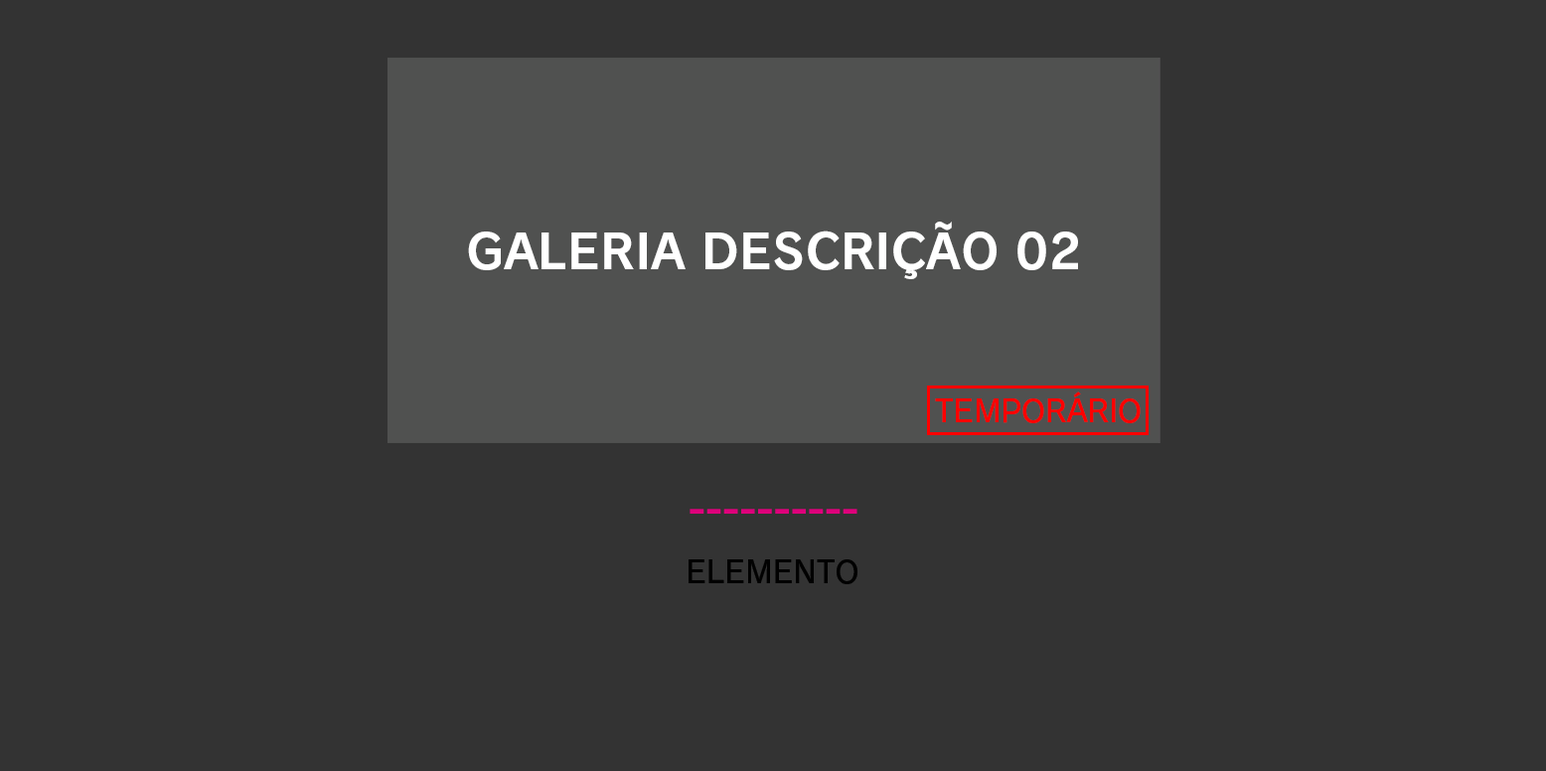
<style>
.page{position:relative;width:1546px;height:771px;background:#333333}
.page>*{position:absolute;margin:0}
.t1{font:47.7px "RodinNTLGPro-B";color:#ffffff}
.t2{font:30.5px "RodinProN-DB";letter-spacing:-0.014em;color:#ff0000}
.t3{font:30.5px "RodinNTLGPro-DB";color:#010101}
</style>
<div class="page">
<p class="t1" style="left:468px;top:222px;width:610px;height:57px">GALERIA DESCRIÇÃO 02</p>
<p class="t2" style="left:935px;top:392px;width:206px;height:31px">TEMPORÁRIO</p>
<p class="t3" style="left:689px;top:559px;width:169px;height:25px">ELEMENTO</p>
</div>
